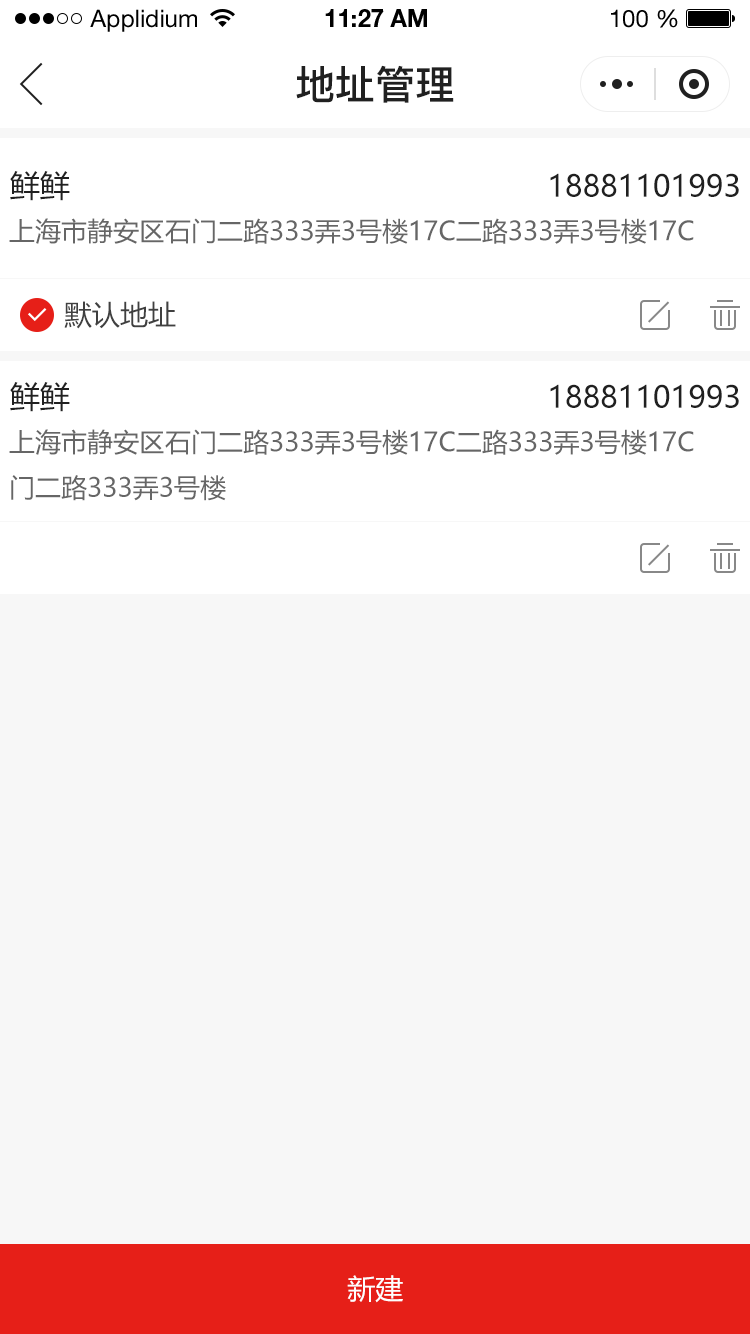
<style>
.page{position:relative;width:750px;height:1334px;background:#f7f7f7}
.page>*{position:absolute;margin:0}
.t1{font:24px "HelveticaNeueLTStd-Roman";color:#000000}
.t2{font:24px "HelveticaNeueLTStd-Bd";color:#000000}
.t3{font:40px "PingFang-SC-Bold";color:#202020;text-transform:uppercase}
.t4{font:30px "MicrosoftYaHei";color:#202020;text-transform:uppercase}
.t5{font:26px "MicrosoftYaHei";color:#666666;text-transform:uppercase}
.t6{font:28px "MicrosoftYaHei";color:#404040;text-transform:uppercase}
.t7{font:28px "MicrosoftYaHei";color:#fefefe;text-transform:uppercase}
</style>
<div class="page">
<p class="t1" style="left:90px;top:9px;width:107px;height:23px">Applidium</p>
<p class="t2" style="left:325px;top:9px;width:102px;height:18px">11:27 AM</p>
<p class="t1" style="left:611px;top:9px;width:67px;height:19px">100 %</p>
<p class="t3" style="left:296px;top:65px;width:158px;height:38px">地址管理</p>
<p class="t4" style="left:10px;top:171px;width:60px;height:30px">鲜鲜</p>
<p class="t4" style="left:550px;top:173px;width:189px;height:24px">18881101993</p>
<p class="t5" style="left:9px;top:218px;width:685px;height:26px">上海市静安区石门二路333弄3号楼17c二路333弄3号楼17c</p>
<p class="t6" style="left:64px;top:301px;width:112px;height:28px">默认地址</p>
<p class="t4" style="left:10px;top:382px;width:60px;height:30px">鲜鲜</p>
<p class="t4" style="left:550px;top:384px;width:189px;height:24px">18881101993</p>
<p class="t5" style="left:9px;top:429px;width:685px;height:72px">上海市静安区石门二路333弄3号楼17c二路333弄3号楼17c<br>门二路333弄3号楼</p>
<p class="t7" style="left:347px;top:1275px;width:56px;height:28px">新建</p>
</div>
